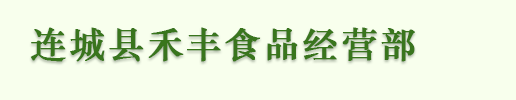
<style>
.page{position:relative;width:516px;height:100px;background:#f8ffed}
.page>*{position:absolute;margin:0}
.t1{font:36px "STZhongsong";letter-spacing:0.06em;color:#39751d;font-weight:bold}
</style>
<div class="page">
<p class="t1" style="left:30px;top:27px;width:385px;height:35px">连城县禾丰食品经营部</p>
</div>
